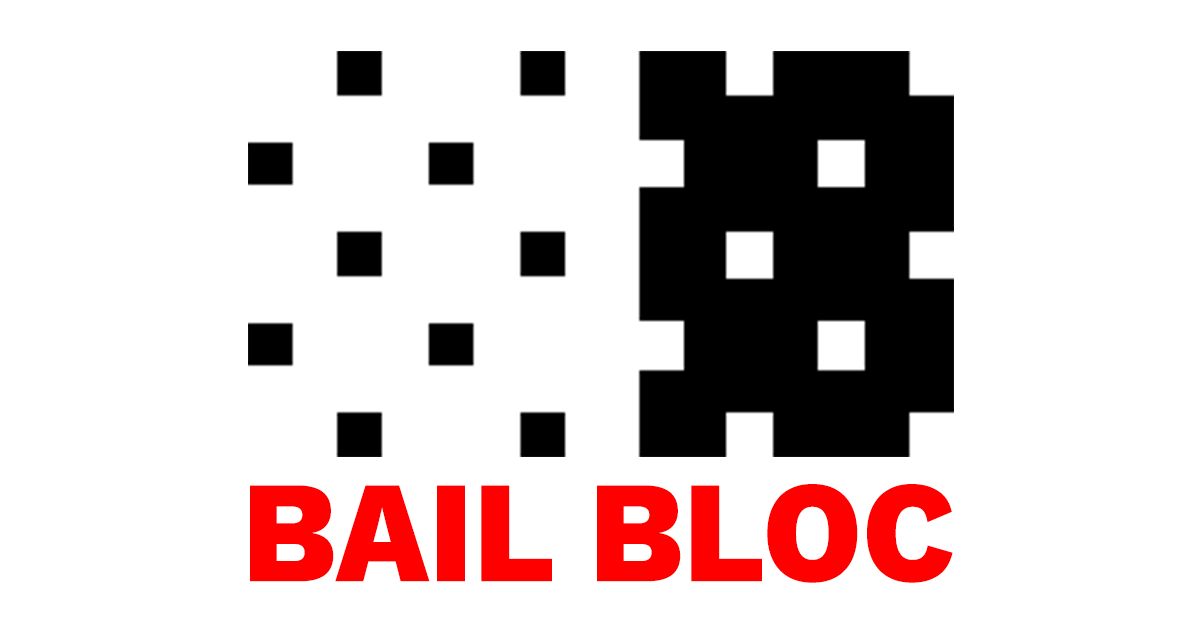
<style>
.page{position:relative;width:1200px;height:630px;background:#ffffff}
.page>*{position:absolute;margin:0}
.t1{font:144.9px "WorkSans-ExtraBold";color:#ff0000;scale:0.94 1}
</style>
<div class="page">
<p class="t1" style="left:250px;top:484px;width:703px;height:99px">BAIL BLOC</p>
</div>
